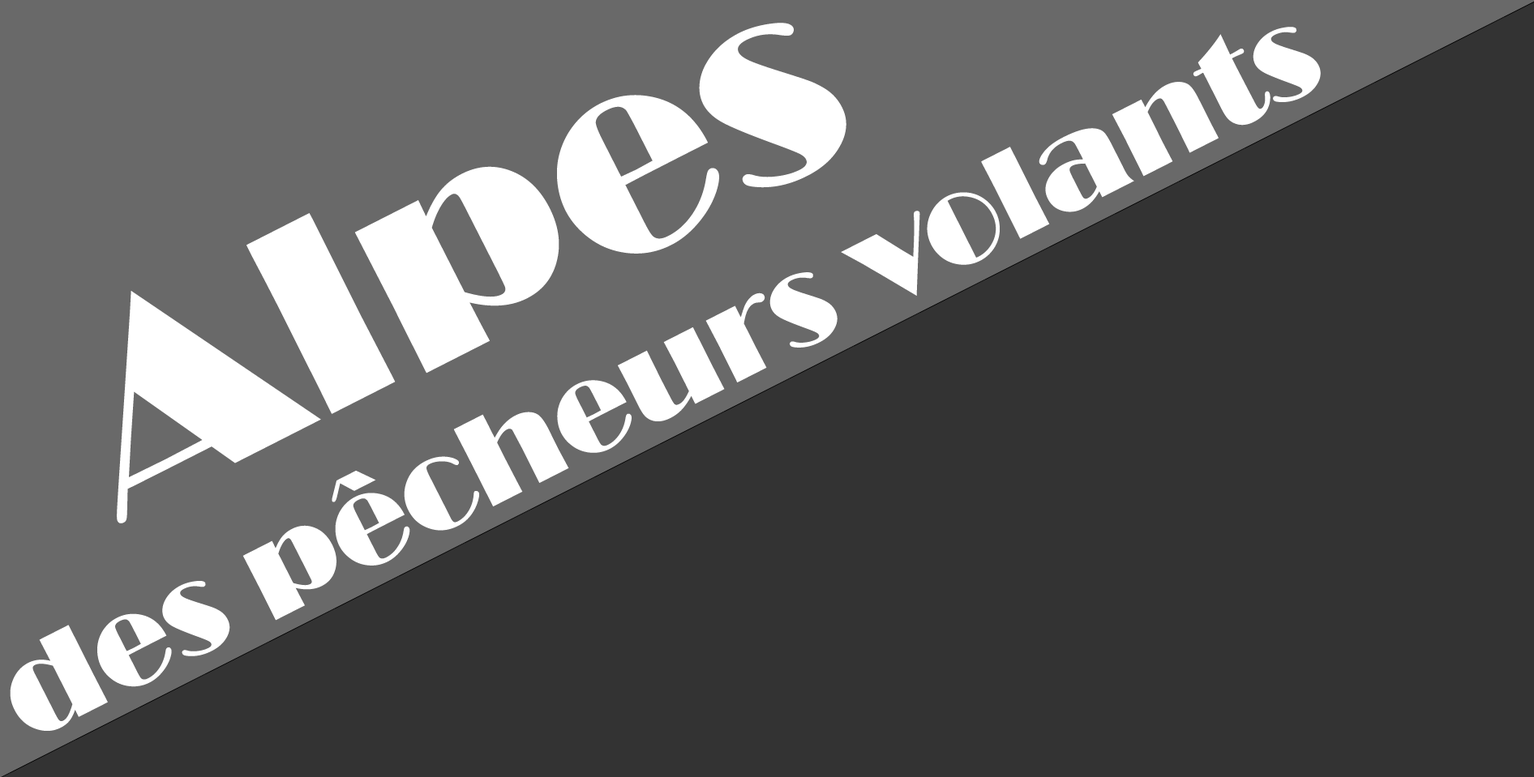
<style>
.page{position:relative;width:1534px;height:777px;background:#333333}
.page>*{position:absolute;margin:0}
.t1{font:129.7px "Broadway";color:#ffffff}
.t2{font:202.7px "Broadway";color:#ffffff}
.t3{font:283.7px "Broadway";color:#ffffff}
</style>
<div class="page">
<p class="t1" style="left:10px;top:23px;width:1311px;height:708px;rotate:-27deg"><span class="t2"><br>   </span><span class="t3">Alpes <br></span>des pêcheurs volants</p>
</div>
